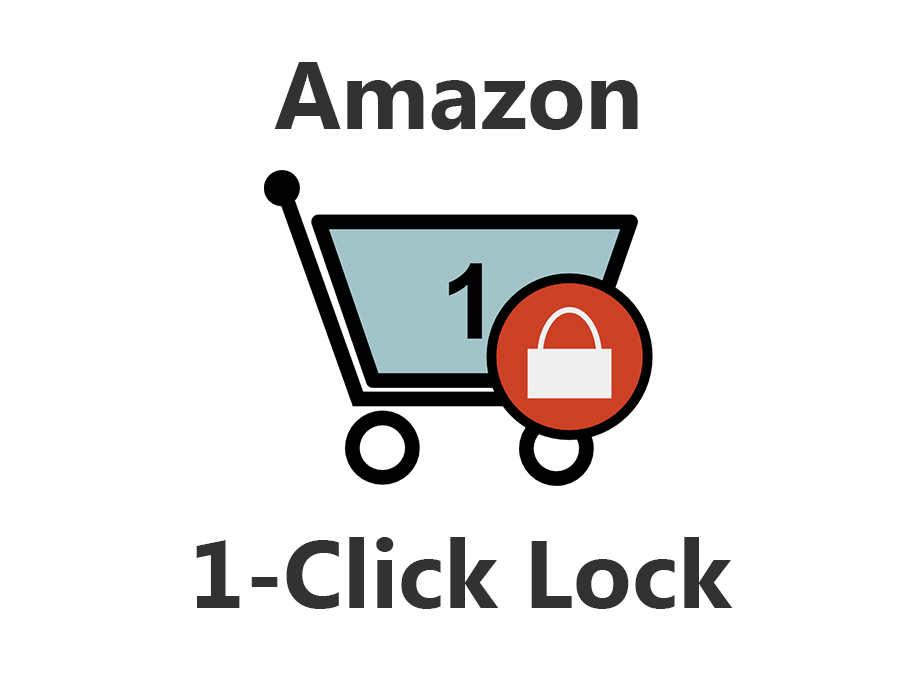
<style>
.page{position:relative;width:920px;height:680px;background:#ffffff}
.page>*{position:absolute;margin:0}
.t1{font:96px "SegoeUI-Bold";color:#323232}
</style>
<div class="page">
<p class="t1" style="left:274px;top:62px;width:364px;height:68px">Amazon</p>
<p class="t1" style="left:196px;top:537px;width:537px;height:72px">1-Click Lock</p>
</div>
